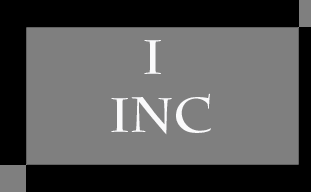
<style>
.page{position:relative;width:311px;height:192px;background:#7f7f7f}
.page>*{position:absolute;margin:0}
.t1{font:48px "CharlemagneStd-Bold";color:#fafafc}
</style>
<div class="page">
<p class="t1" style="left:111px;top:40px;width:100px;height:95px">I<br>INC</p>
</div>
